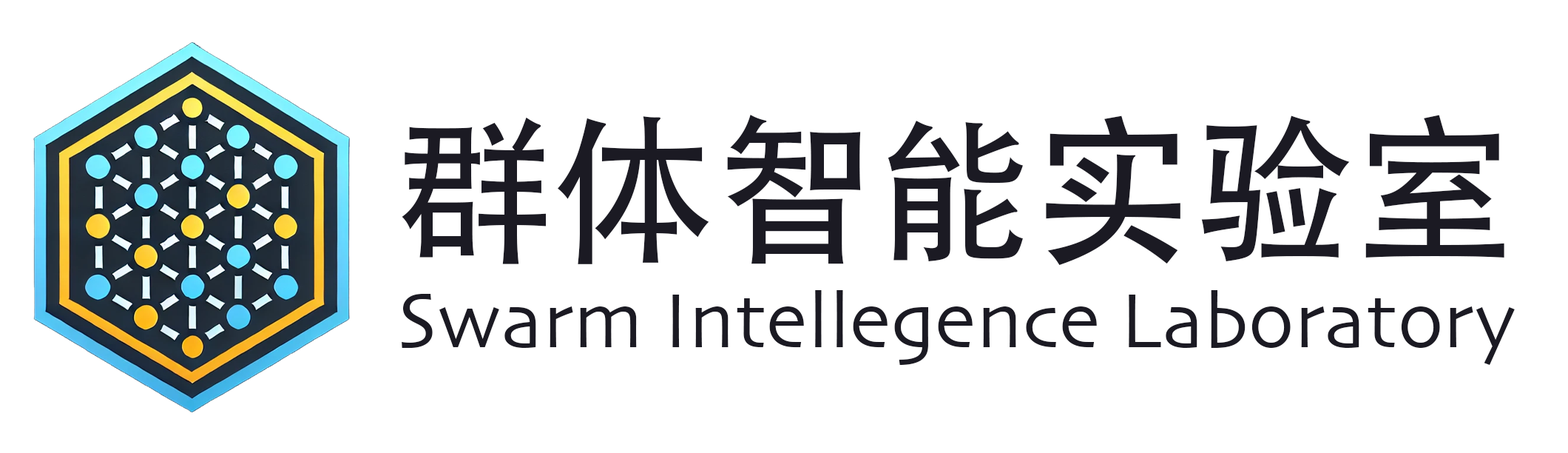
<style>
.page{position:relative;width:1568px;height:453px;background:#ffffff}
.page>*{position:absolute;margin:0}
.t1{font:160.3px "AdobeHeitiStd-Regular";color:#1b1a23}
.t2{font:80.1px "Skia-Regular";color:#1b1a23}
</style>
<div class="page">
<p class="t1" style="left:402px;top:115px;width:1102px;height:151px">群体智能实验室</p>
<p class="t2" style="left:402px;top:290px;width:1113px;height:75px">Swarm Intellegence Laboratory</p>
</div>
